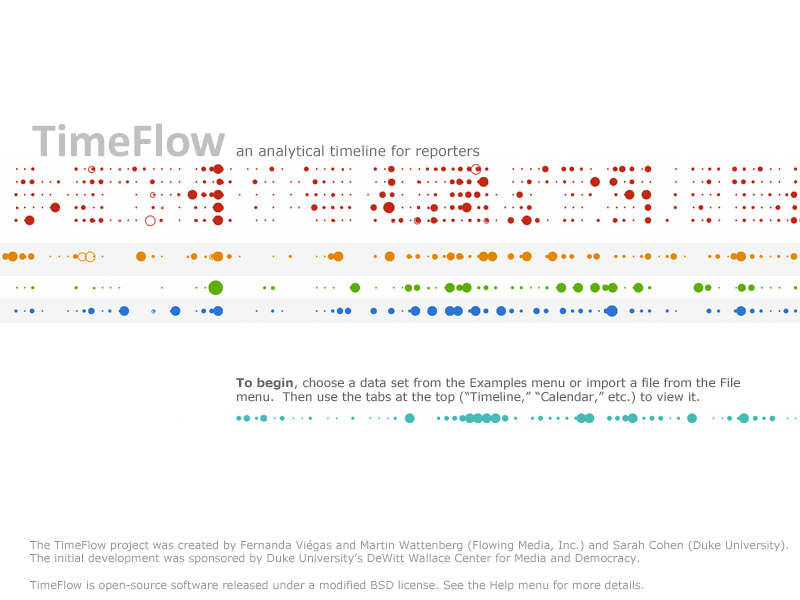
<style>
.page{position:relative;width:800px;height:600px;background:#ffffff}
.page>*{position:absolute;margin:0}
.t1{font:48px "Calibri-Bold";color:#c0c0c0}
.t2{font:14px "Verdana";color:#696868}
.t3{font:12px "Verdana";color:#626262}
.t4{font:12px "Verdana-Bold";color:#626262}
.t5{font:11px "Verdana";color:#989797}
.t6{font:10px "Verdana-Bold";color:#989797}
</style>
<div class="page">
<p class="t1" style="left:32px;top:123px;width:193px;height:34px">TimeFlow</p>
<p class="t2" style="left:236px;top:145px;width:244px;height:14px">an analytical timeline for reporters</p>
<p class="t3" style="left:236px;top:377px;width:504px;height:27px"><span class="t4">To begin</span>, choose a data set from the Examples menu or import a file from the File <br>menu.  Then use the tabs at the top (“Timeline,” “Calendar,” etc.) to view it.</p>
<p class="t5" style="left:30px;top:540px;width:758px;height:52px"><span class="t6"><br></span>The TimeFlow project was created by Fernanda Viégas and Martin Wattenberg (Flowing Media, Inc.) and Sarah Cohen (Duke University). <br>The initial development was sponsored by Duke University’s DeWitt Wallace Center for Media and Democracy. <br><br>TimeFlow is open-source software released under a modified BSD license. See the Help menu for more details.</p>
</div>
